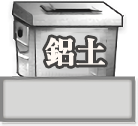
<style>
.page{position:relative;width:138px;height:126px}
.page>*{position:absolute;margin:0}
.t1{font:30px "RyuminPr6N-ExBold";color:#fff9f3;font-weight:bold}
</style>
<div class="page">
<p class="t1" style="left:45px;top:37px;width:60px;height:29px">鋁土</p>
</div>
